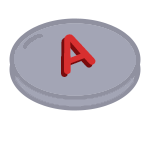
<style>
.page{position:relative;width:150px;height:150px;background:#ffffff}
.page>*{position:absolute;margin:0}
.t1{font:50px "ArialRoundedMTBold"}
.t2{font:50px "ArialRoundedMTBold";color:#d82f2f}
</style>
<div class="page">
<p class="t1" style="left:61px;top:37px;width:32px;height:40px;rotate:-21deg">A</p>
<p class="t2" style="left:64px;top:34px;width:32px;height:40px;rotate:-21deg">A</p>
</div>
